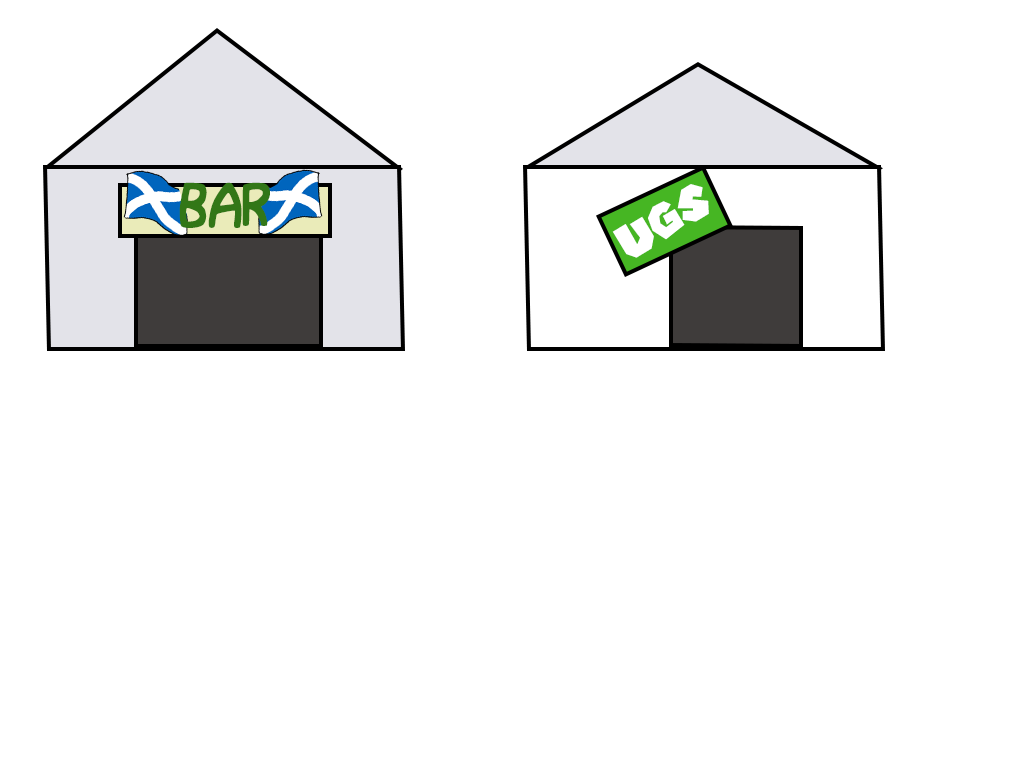
<style>
.page{position:relative;width:1035px;height:775px;background:#ffffff}
.page>*{position:absolute;margin:0}
.t1{font:70.7px "JWerd";color:#327717}
.t2{font:46.6px "SuperMarioGalaxy";color:#ffffff}
</style>
<div class="page">
<p class="t1" style="left:179px;top:182px;width:91px;height:46px">BAR</p>
<p class="t2" style="left:612px;top:184px;width:97px;height:74px;rotate:-31deg">UGS</p>
</div>
